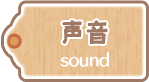
<style>
.page{position:relative;width:149px;height:82px}
.page>*{position:absolute;margin:0}
.t1{font:15.6px "shetumodengxiaofangti";color:#a07864;font-weight:bold;scale:0.94 1}
</style>
<div class="page">
<p class="t1" style="left:62px;top:20px;width:46px;height:25px">声音</p>
</div>
